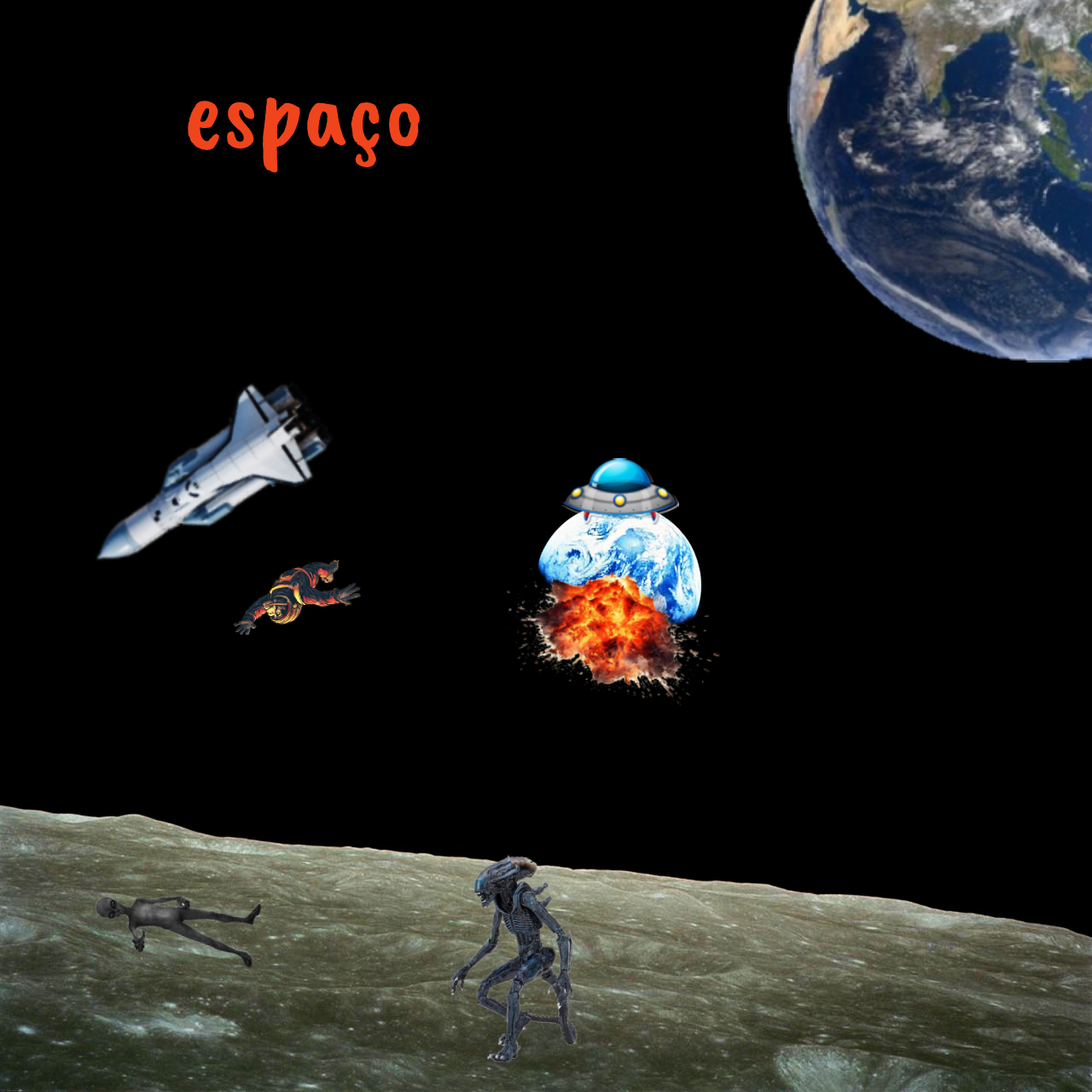
<style>
.page{position:relative;width:1092px;height:1092px;background:#000000}
.page>*{position:absolute;margin:0}
.t1{font:103.2px "CaveatBrush-Regular";color:#f0441c}
</style>
<div class="page">
<p class="t1" style="left:188px;top:96px;width:233px;height:77px">espaço</p>
</div>
